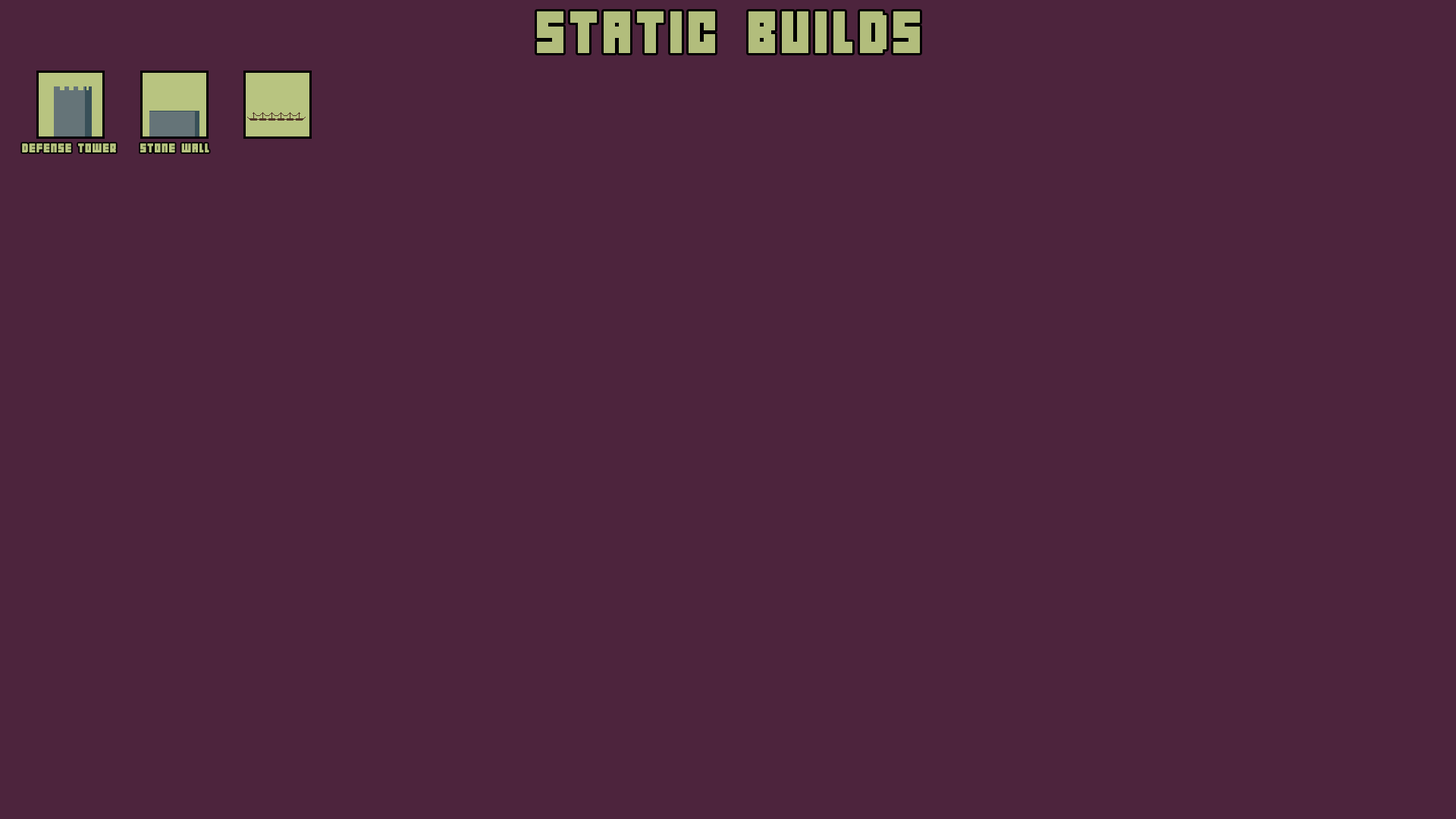
<style>
.page{position:relative;width:1456px;height:819px;background:#4d243d}
.page>*{position:absolute;margin:0}
.t1{font:53.1px "04b19";letter-spacing:0.06em;color:#b2bd7c}
.t2{font:11.4px "04b19";letter-spacing:0.06em;color:#b8c480}
</style>
<div class="page">
<p class="t1" style="left:537px;top:11px;width:383px;height:42px">STATIC BUILDS</p>
<p class="t2" style="left:22px;top:143px;width:94px;height:9px">DEFENSE TOWER</p>
<p class="t2" style="left:140px;top:143px;width:69px;height:9px">STONE WALL</p>
</div>
